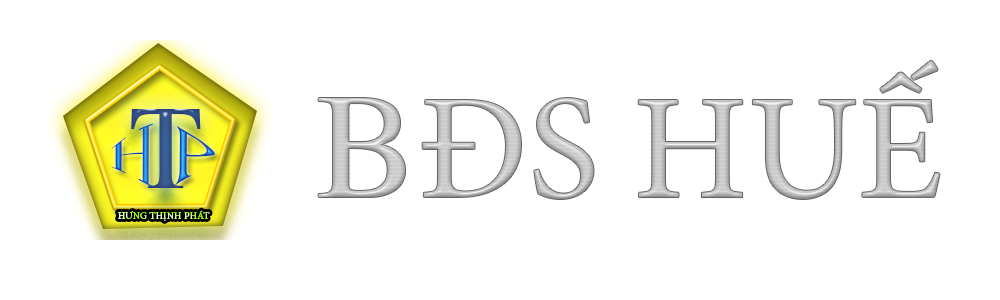
<style>
.page{position:relative;width:1000px;height:300px;background:#ffffff}
.page>*{position:absolute;margin:0}
.t1{font:150px "MinionPro-Regular";color:#c7c7c7}
.t2{font:150px "VNI-Times";color:#c7c7c7}
</style>
<div class="page">
<p class="t1" style="left:318px;top:60px;width:622px;height:140px"><span class="t2">B</span>ĐS HUẾ</p>
</div>
